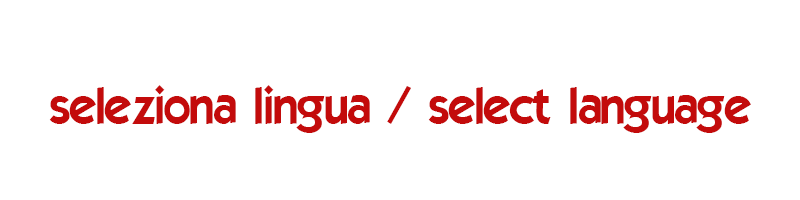
<style>
.page{position:relative;width:800px;height:200px;background:#ffffff}
.page>*{position:absolute;margin:0}
.t1{font:50px "ELEGANCE";color:#c30b0b}
</style>
<div class="page">
<p class="t1" style="left:49px;top:85px;width:702px;height:48px">seleziona lingua / select language</p>
</div>
